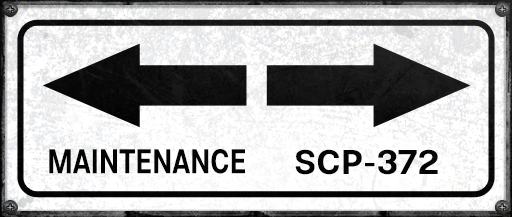
<style>
.page{position:relative;width:512px;height:217px}
.page>*{position:absolute;margin:0}
.t1{font:34.5px "Molde-Semibold";color:#000000;scale:0.79 1}
.t2{font:34.5px "Molde-Semibold";color:#000000}
</style>
<div class="page">
<p class="t1" style="left:49px;top:149px;width:196px;height:25px">MAINTENANCE</p>
<p class="t2" style="left:295px;top:149px;width:143px;height:26px">SCP-372</p>
</div>
